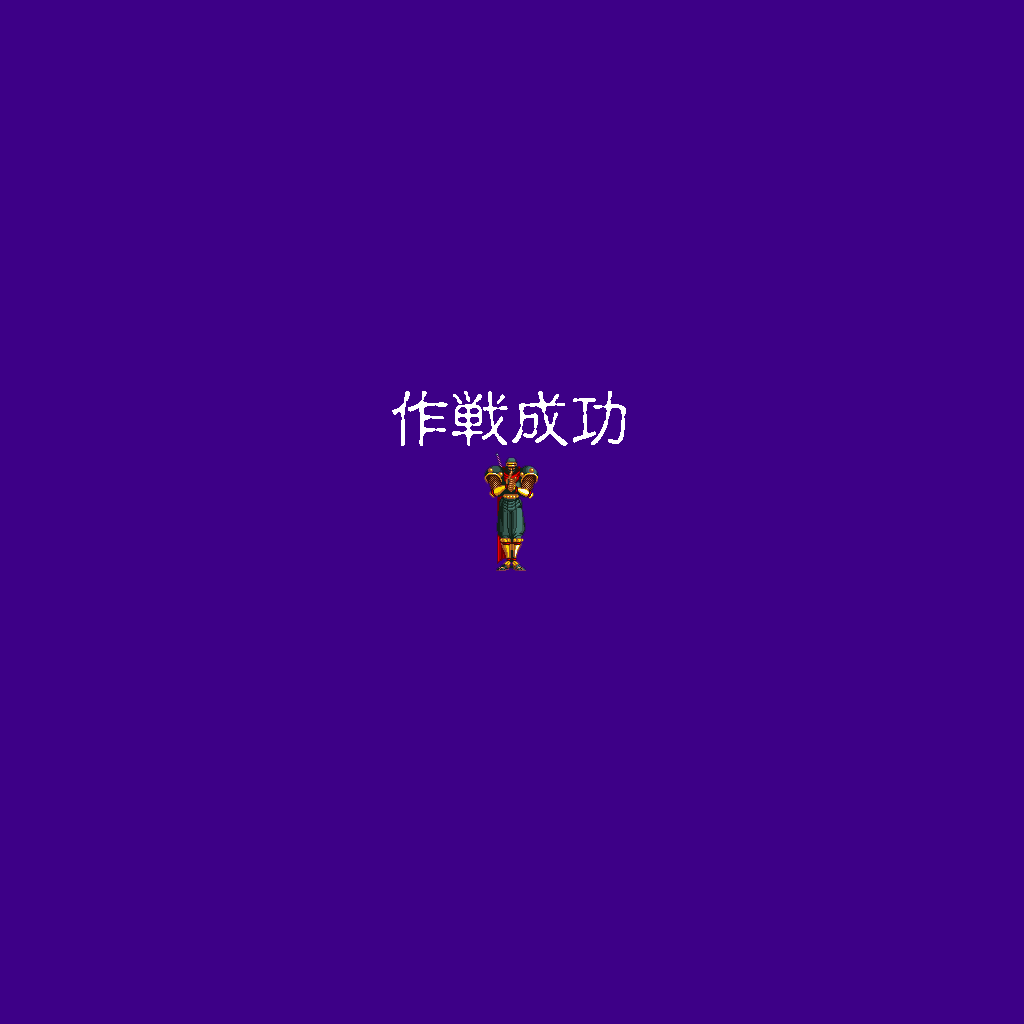
<style>
.page{position:relative;width:1024px;height:1024px;background:#3d0087}
.page>*{position:absolute;margin:0}
.t1{font:60px "DFKoIn-W4-WING-RKSJ-H";color:#ffffff}
</style>
<div class="page">
<p class="t1" style="left:392px;top:391px;width:234px;height:55px">作戦成功</p>
</div>
